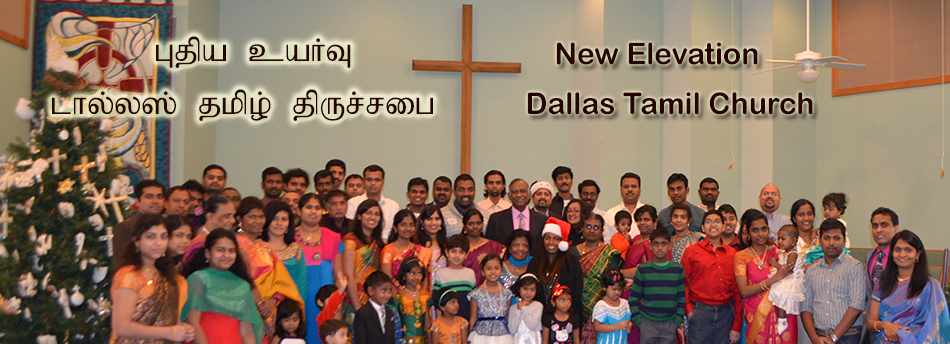
<style>
.page{position:relative;width:950px;height:344px}
.page>*{position:absolute;margin:0}
.t1{font:36px "Bamini-Plain";color:#250403}
.t2{font:30px "ArialRoundedMTBold";color:#250403}
</style>
<div class="page">
<p class="t1" style="left:156px;top:36px;width:195px;height:32px">Gjpa caHT</p>
<p class="t2" style="left:556px;top:42px;width:202px;height:23px">New Elevation</p>
<p class="t1" style="left:52px;top:89px;width:381px;height:32px">lhy;y]; jkpo; jpUr;rig</p>
<p class="t2" style="left:527px;top:92px;width:286px;height:23px">Dallas Tamil Church</p>
</div>
